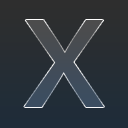
<style>
.page{position:relative;width:128px;height:128px}
.page>*{position:absolute;margin:0}
.t1{font:180px "MyriadPro-Regular";color:#434c57}
</style>
<div class="page">
<p class="t1" style="left:24px;top:20px;width:80px;height:87px">x</p>
</div>
